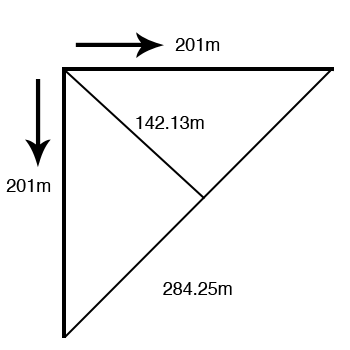
<style>
.page{position:relative;width:350px;height:350px;background:#ffffff}
.page>*{position:absolute;margin:0}
.t1{font:18px "Helvetica";color:#000000}
</style>
<div class="page">
<p class="t1" style="left:175px;top:38px;width:45px;height:13px">201m</p>
<p class="t1" style="left:136px;top:116px;width:68px;height:13px">142.13m</p>
<p class="t1" style="left:6px;top:179px;width:45px;height:13px">201m</p>
<p class="t1" style="left:163px;top:282px;width:69px;height:13px">284.25m</p>
</div>
